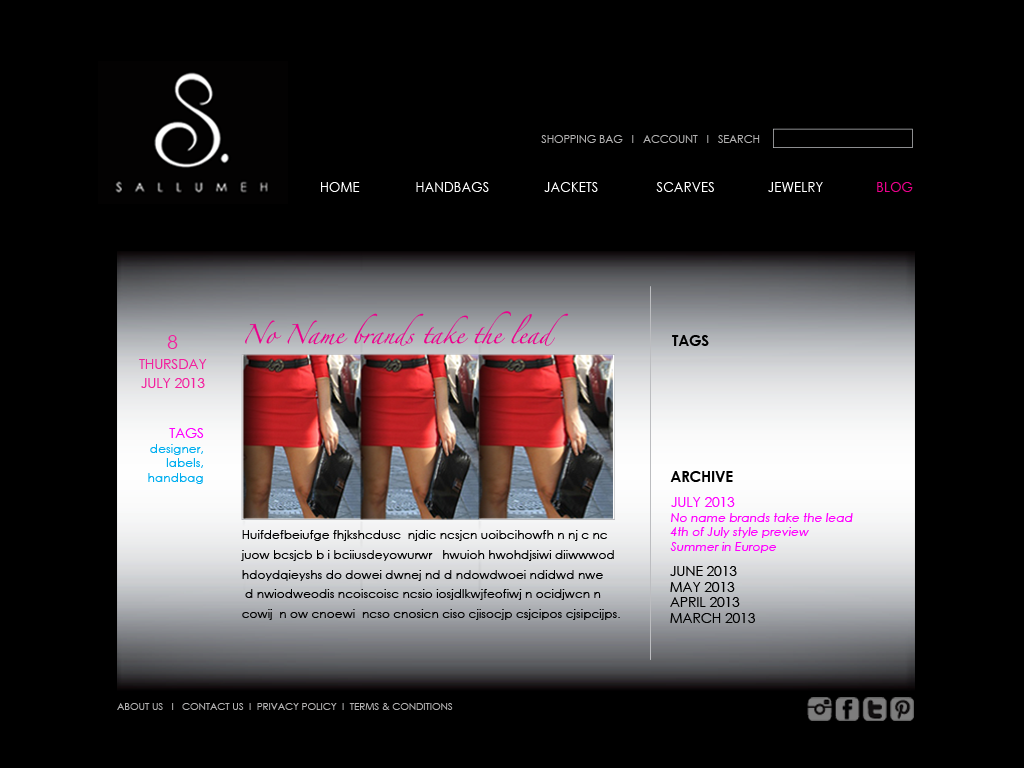
<style>
.page{position:relative;width:1024px;height:768px;background:#000000}
.page>*{position:absolute;margin:0}
.t1{font:10.9px "CenturyGothic";color:#b2b1b1}
.t2{font:14.2px "CenturyGothic";letter-spacing:0.025em;color:#ffffff;scale:0.9 1}
.t3{font:14.2px "CenturyGothic";letter-spacing:0.025em;color:#ec008c;scale:0.9 1}
.t4{font:13.8px/19.6px "CenturyGothic";color:#f3219e}
.t5{font:19.6px/19.6px "CenturyGothic";color:#f3219e}
.t6{font:14.7px "CenturyGothic-Bold";color:#000000}
.t7{font:12.3px "CenturyGothic";color:#00aeef}
.t8{font:13.8px/19.6px "CenturyGothic";color:#ff00ff}
.t9{font:12.3px "CenturyGothic-Italic";color:#ff00ff}
.t10{font:13.8px/15.6px "CenturyGothic";color:#000000}
.t11{font:10px "CenturyGothic";color:#b2b1b1}
</style>
<div class="page">
<p class="t1" style="left:541px;top:135px;width:219px;height:8px">SHOPPING BAG   I   ACCOUNT   I   SEARCH</p>
<p class="t2" style="left:321px;top:182px;width:39px;height:10px">HOME</p>
<p class="t2" style="left:416px;top:182px;width:73px;height:10px">HANDBAGS</p>
<p class="t2" style="left:544px;top:182px;width:54px;height:10px">JACKETS</p>
<p class="t2" style="left:656px;top:182px;width:58px;height:10px">SCARVES</p>
<p class="t2" style="left:768px;top:182px;width:55px;height:10px">JEWELRY</p>
<p class="t3" style="left:877px;top:182px;width:36px;height:10px">BLOG</p>
<p class="t4" style="left:139px;top:335px;width:68px;height:53px;text-align:center"><span class="t5">8<br></span>THURSDAY<br>JULY 2013</p>
<p class="t6" style="left:672px;top:335px;width:37px;height:11px">TAGS</p>
<p class="t7" style="left:148px;top:428px;width:56px;height:56px;text-align:right"><span class="t8">TAGS<br></span>designer,<br>labels,<br>handbag</p>
<p class="t6" style="left:670px;top:471px;width:63px;height:11px">ARCHIVE</p>
<p class="t9" style="left:670px;top:497px;width:183px;height:56px"><span class="t8">JULY 2013<br></span>No name brands take the lead<br>4th of July style preview<br>Summer in Europe</p>
<p class="t10" style="left:670px;top:566px;width:85px;height:57px">JUNE 2013<br>MAY 2013<br>APRIL 2013<br>MARCH 2013</p>
<p class="t11" style="left:117px;top:703px;width:336px;height:7px">ABOUT US   I   CONTACT US  I  PRIVACY POLICY  I  TERMS &amp; CONDITIONS</p>
</div>
